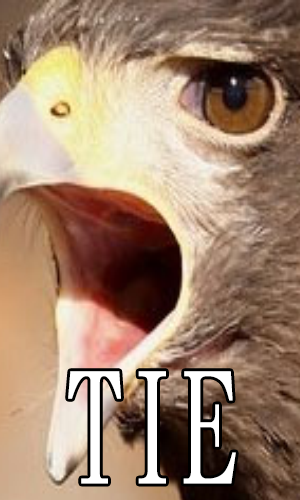
<style>
.page{position:relative;width:300px;height:500px}
.page>*{position:absolute;margin:0}
.t1{font:152px "DFKaiShu-SB-Estd-BF";color:#ffffff;scale:0.76 1}
</style>
<div class="page">
<p class="t1" style="left:68px;top:371px;width:168px;height:113px">TIE</p>
</div>
